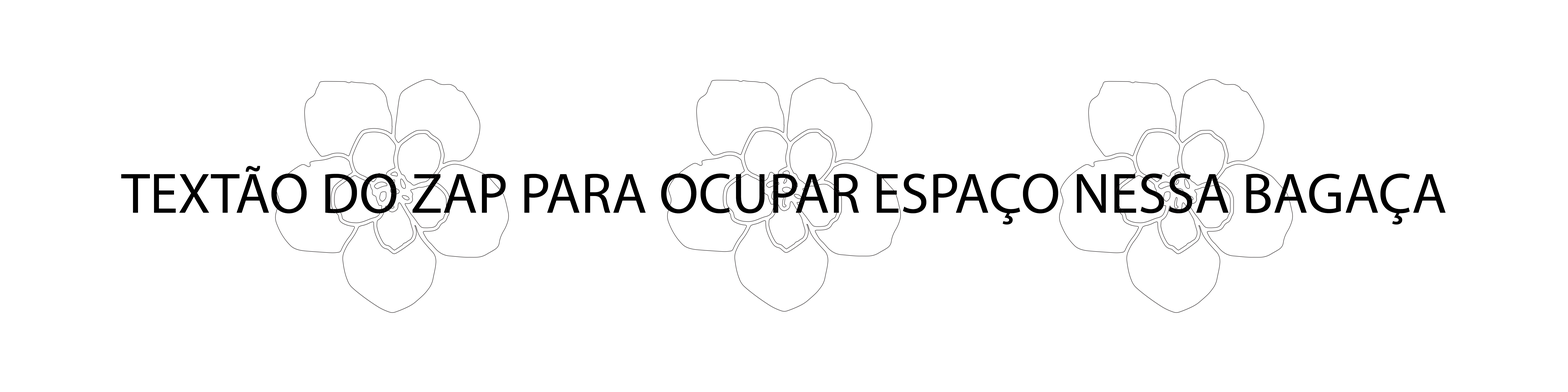
<style>
.page{position:relative;width:1568px;height:392px;background:#ffffff}
.page>*{position:absolute;margin:0}
.t1{font:57.3px "MyriadPro-Regular";color:#000000;text-transform:uppercase}
</style>
<div class="page">
<p class="t1" style="left:121px;top:166px;width:1325px;height:59px">textão do zap para ocupar espaço nessa bagaça</p>
</div>
